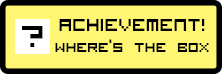
<style>
.page{position:relative;width:222px;height:74px;background:#fff774}
.page>*{position:absolute;margin:0}
.t1{font:41px "VisitorTT1BRK";color:#000000}
.t2{font:18px "VisitorTT1BRK";color:#000000}
.t3{font:23px "VisitorTT1BRK";color:#000000}
</style>
<div class="page">
<p class="t1" style="left:22px;top:26px;width:21px;height:21px">?</p>
<p class="t2" style="left:55px;top:19px;width:154px;height:33px;text-align:center"><span class="t3">achievement!<br></span>Where’s the box</p>
</div>
